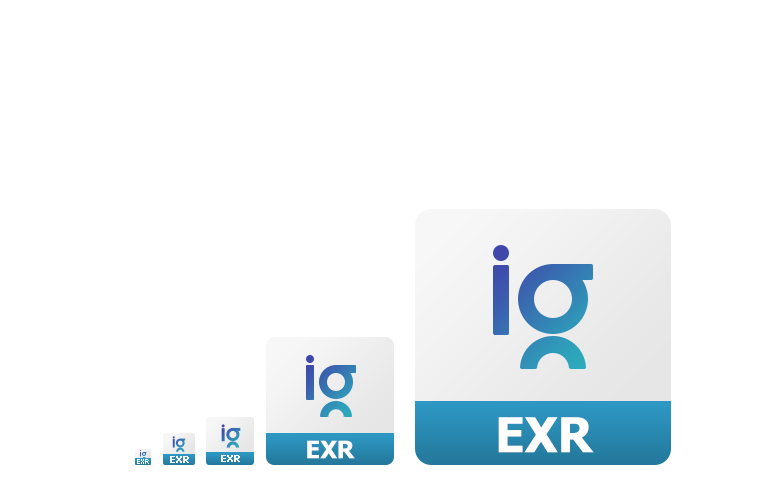
<style>
.page{position:relative;width:768px;height:480px;background:#ffffff}
.page>*{position:absolute;margin:0}
.t1{font:48px "Tahoma-Bold";color:#ffffff}
.t2{font:24px "Tahoma-Bold";color:#ffffff}
.t3{font:10px "Tahoma-Bold";color:#ffffff}
</style>
<div class="page">
<p class="t1" style="left:498px;top:417px;width:96px;height:36px">EXR</p>
<p class="t2" style="left:307px;top:440px;width:48px;height:19px">EXR</p>
<p class="t3" style="left:170px;top:456px;width:19px;height:7px">EXR</p>
<p class="t3" style="left:221px;top:455px;width:19px;height:7px">EXR</p>
</div>
